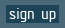
<style>
.page{position:relative;width:65px;height:28px;background:#496979}
.page>*{position:absolute;margin:0}
.t1{font:16.7px "ISOCPEUR";color:#ffffff}
</style>
<div class="page">
<p class="t1" style="left:9px;top:8px;width:47px;height:14px">sign up</p>
</div>
